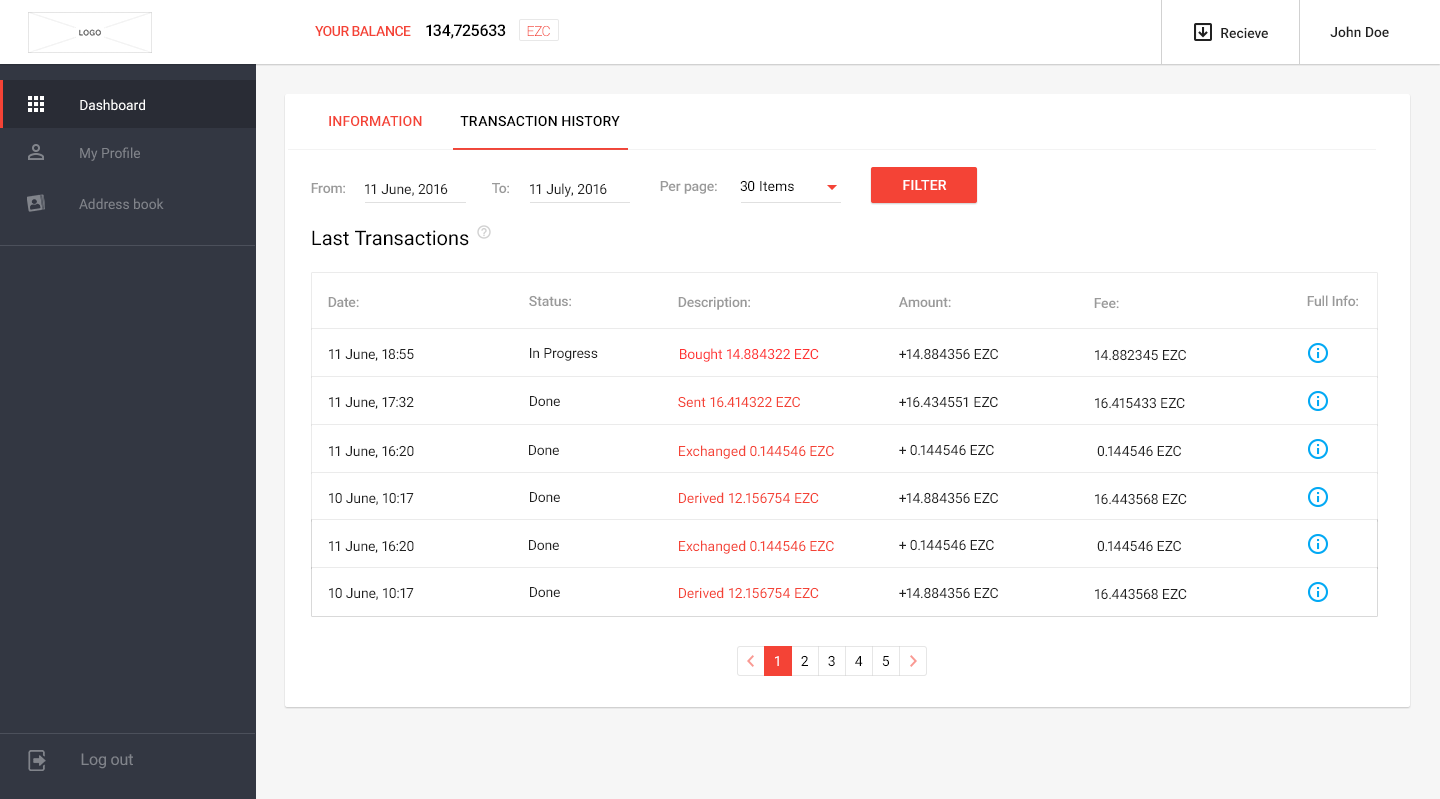
<style>
.page{position:relative;width:1440px;height:799px;background:#ffffff}
.page>*{position:absolute;margin:0}
.t1{font:14px "Roboto-Medium";letter-spacing:-0.04em;color:#f44336;text-transform:uppercase}
.t2{font:16px "Roboto-Medium";letter-spacing:-0.02em;color:#000000}
.t3{font:14px "Roboto-Light";letter-spacing:-0.04em;color:#f44336}
.t4{font:14px "Roboto-Medium";color:#212121}
.t5{font:14px "Roboto-Regular";color:#ffffff}
.t6{font:14px "Roboto-Medium";letter-spacing:0.01em;color:#f44336;text-transform:uppercase}
.t7{font:14px "Roboto-Medium";letter-spacing:0.01em;color:#000000;text-transform:uppercase}
.t8{font:14px "Roboto-Regular";color:#81848b}
.t9{font:14px "Roboto-Medium";letter-spacing:-0.01em;color:#9a9a9a}
.t10{font:14px "Roboto-Regular";letter-spacing:-0.01em;color:#212121}
.t11{font:14px "Roboto-Regular";letter-spacing:0.03em;color:#212121}
.t12{font:14px "Roboto-Regular";letter-spacing:0.01em;color:#212121}
.t13{font:14px "Roboto-Regular";letter-spacing:0.01em;color:#000000}
.t14{font:14px "Roboto-Regular";letter-spacing:-0.03em;color:#000000}
.t15{font:14px "Roboto-Medium";letter-spacing:0.01em;color:#ffffff;text-transform:uppercase}
.t16{font:20px "Roboto-Regular";letter-spacing:0.005em;color:#000000}
.t17{font:14px "Roboto-Regular";letter-spacing:-0.011em;color:#ff3333}
.t18{font:14px "Roboto-Regular";letter-spacing:-0.01em;color:#ff3333}
.t19{font:14px "Roboto-Regular";letter-spacing:-0.011em;color:#212121}
.t20{font:14px "Roboto-Regular";letter-spacing:-0.011em;color:#f44336}
.t21{font:14px "Roboto-Regular";color:#f44336}
.t22{font:14px "Roboto-Regular";letter-spacing:-0.009em;color:#f44336}
.t23{font:14px "Roboto-Regular";letter-spacing:-0.01em;color:#ffffff}
.t24{font:14px "Roboto-Regular";letter-spacing:-0.01em;color:#000000}
.t25{font:16px "Roboto-Regular";letter-spacing:-0.011em;color:#81848b}
</style>
<div class="page">
<p class="t1" style="left:315px;top:25px;width:96px;height:12px">Your balance</p>
<p class="t2" style="left:426px;top:24px;width:80px;height:15px">134,725633</p>
<p class="t3" style="left:527px;top:25px;width:23px;height:12px">EZC</p>
<p class="t4" style="left:1221px;top:27px;width:47px;height:12px">Recieve</p>
<p class="t4" style="left:1330px;top:26px;width:59px;height:12px">John Doe</p>
<p class="t5" style="left:80px;top:99px;width:65px;height:12px">Dashboard</p>
<p class="t6" style="left:329px;top:115px;width:93px;height:12px">Information</p>
<p class="t7" style="left:460px;top:115px;width:160px;height:12px">Transaction history</p>
<p class="t8" style="left:80px;top:147px;width:60px;height:14px">My Profile</p>
<p class="t9" style="left:311px;top:183px;width:34px;height:11px">From:</p>
<p class="t10" style="left:365px;top:183px;width:83px;height:13px">11 Jun<span class="t11">e</span><span class="t12">,</span> 2016</p>
<p class="t9" style="left:492px;top:183px;width:17px;height:11px">To:</p>
<p class="t10" style="left:530px;top:183px;width:77px;height:14px">11 Jul<span class="t11">y</span><span class="t12">,</span> 2016</p>
<p class="t9" style="left:660px;top:181px;width:57px;height:13px">Per page:</p>
<p class="t13" style="left:740px;top:180px;width:54px;height:12px"><span class="t14">3</span>0 Items</p>
<p class="t15" style="left:903px;top:180px;width:44px;height:10px">filter</p>
<p class="t8" style="left:79px;top:198px;width:85px;height:12px">Address book</p>
<p class="t16" style="left:312px;top:230px;width:157px;height:16px">Last Transactions</p>
<p class="t9" style="left:328px;top:297px;width:31px;height:11px">Date:</p>
<p class="t9" style="left:529px;top:295px;width:42px;height:12px">Status:</p>
<p class="t9" style="left:678px;top:296px;width:72px;height:14px">Description:</p>
<p class="t9" style="left:898px;top:297px;width:53px;height:11px">Amount:</p>
<p class="t9" style="left:1094px;top:298px;width:25px;height:11px">Fee:</p>
<p class="t9" style="left:1307px;top:295px;width:51px;height:12px">Full Info:</p>
<p class="t10" style="left:329px;top:348px;width:85px;height:13px">11 June, 18:55</p>
<p class="t10" style="left:530px;top:348px;width:68px;height:13px">In Progress</p>
<p class="t17" style="left:680px;top:348px;width:139px;height:14px"><span class="t18">Bought </span>14.884322 EZC</p>
<p class="t10" style="left:899px;top:348px;width:99px;height:12px">+14.884356 <span class="t19">EZC</span></p>
<p class="t10" style="left:1095px;top:349px;width:91px;height:12px">14.882345 <span class="t19">EZC</span></p>
<p class="t10" style="left:329px;top:396px;width:85px;height:13px">11 June, 17:32</p>
<p class="t10" style="left:530px;top:396px;width:30px;height:11px">Done</p>
<p class="t20" style="left:678px;top:396px;width:122px;height:12px"><span class="t21">Sent </span>16.414322 EZC</p>
<p class="t10" style="left:899px;top:396px;width:99px;height:12px">+16.434551 <span class="t19">EZC</span></p>
<p class="t10" style="left:1095px;top:397px;width:90px;height:12px">16.415433 <span class="t19">EZC</span></p>
<p class="t10" style="left:329px;top:445px;width:85px;height:13px">11 June, 16:20</p>
<p class="t10" style="left:529px;top:445px;width:30px;height:11px">Done</p>
<p class="t21" style="left:679px;top:445px;width:155px;height:14px">Exchanged <span class="t22">0.144546 </span><span class="t20">EZC</span></p>
<p class="t10" style="left:899px;top:444px;width:95px;height:12px">+ 0.144546 <span class="t19">EZC</span></p>
<p class="t10" style="left:1097px;top:445px;width:84px;height:12px">0.144546 <span class="t19">EZC</span></p>
<p class="t10" style="left:329px;top:492px;width:85px;height:13px">10 June, 10:17</p>
<p class="t10" style="left:530px;top:492px;width:30px;height:11px">Done</p>
<p class="t21" style="left:679px;top:492px;width:140px;height:12px">Derived 12.156754 <span class="t20">EZC</span></p>
<p class="t10" style="left:899px;top:492px;width:99px;height:12px">+14.884356 <span class="t19">EZC</span></p>
<p class="t10" style="left:1095px;top:493px;width:92px;height:12px">16.443568 <span class="t19">EZC</span></p>
<p class="t10" style="left:329px;top:540px;width:85px;height:13px">11 June, 16:20</p>
<p class="t10" style="left:529px;top:540px;width:30px;height:11px">Done</p>
<p class="t21" style="left:679px;top:540px;width:155px;height:14px">Exchanged <span class="t22">0.144546 </span><span class="t20">EZC</span></p>
<p class="t10" style="left:899px;top:539px;width:95px;height:12px">+ 0.144546 <span class="t19">EZC</span></p>
<p class="t10" style="left:1097px;top:540px;width:84px;height:12px">0.144546 <span class="t19">EZC</span></p>
<p class="t10" style="left:329px;top:587px;width:85px;height:13px">10 June, 10:17</p>
<p class="t10" style="left:530px;top:587px;width:30px;height:11px">Done</p>
<p class="t21" style="left:679px;top:587px;width:140px;height:12px">Derived 12.156754 <span class="t20">EZC</span></p>
<p class="t10" style="left:899px;top:587px;width:99px;height:12px">+14.884356 <span class="t19">EZC</span></p>
<p class="t10" style="left:1095px;top:588px;width:92px;height:12px">16.443568 <span class="t19">EZC</span></p>
<p class="t23" style="left:775px;top:656px;width:4px;height:10px">1</p>
<p class="t24" style="left:801px;top:655px;width:7px;height:11px">2</p>
<p class="t24" style="left:828px;top:655px;width:7px;height:12px">3</p>
<p class="t24" style="left:855px;top:656px;width:8px;height:10px">4</p>
<p class="t24" style="left:882px;top:656px;width:7px;height:11px">5</p>
<p class="t25" style="left:81px;top:753px;width:52px;height:16px">Log out</p>
</div>
